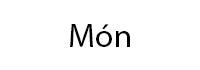
<style>
.page{position:relative;width:200px;height:70px;background:#ffffff}
.page>*{position:absolute;margin:0}
.t1{font:32.9px "MyriadPro-Regular";color:#000000}
</style>
<div class="page">
<p class="t1" style="left:70px;top:24px;width:60px;height:23px">Món</p>
</div>
